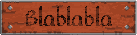
<style>
.page{position:relative;width:137px;height:35px}
.page>*{position:absolute;margin:0}
.t1{font:21.7px "God'sChoice-Bold";letter-spacing:-0.065em}
</style>
<div class="page">
<p class="t1" style="left:25px;top:6px;width:87px;height:20px">Blablabla</p>
</div>
